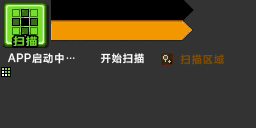
<style>
.page{position:relative;width:256px;height:128px;background:#333333}
.page>*{position:absolute;margin:0}
.t1{font:10.8px "HYWenHei-HEW";letter-spacing:0.045em;color:#73d92f;scale:1.11 1}
.t2{font:10.7px "FZLTHProGlobal-Demibold";letter-spacing:0.045em;color:#ffffff}
.t3{font:10.7px "HYWenHei-FEW";letter-spacing:0.045em;color:#ffffff}
.t4{font:10.7px "FZLTHProGlobal-Demibold";letter-spacing:0.045em;color:#7d4c02}
</style>
<div class="page">
<p class="t1" style="left:13px;top:36px;width:24px;height:11px">扫描</p>
<p class="t2" style="left:8px;top:53px;width:67px;height:11px">APP启动中<span class="t3">…</span></p>
<p class="t2" style="left:100px;top:53px;width:44px;height:11px">开始扫描</p>
<p class="t4" style="left:180px;top:54px;width:44px;height:11px">扫描区域</p>
</div>
